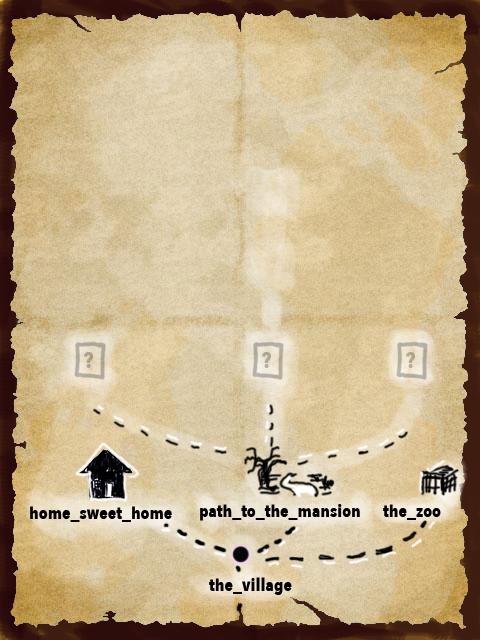
<style>
.page{position:relative;width:480px;height:640px}
.page>*{position:absolute;margin:0}
.t1{font:22.9px "AvenirNextCondensed-Bold";color:#aba08a}
.t2{font:22.9px "AvenirNextCondensed-Bold";color:#aea695}
.t3{font:22.9px "AvenirNextCondensed-Bold";color:#b1a690}
.t4{font:18px "AvenirNextCondensed-Bold";color:#020002}
</style>
<div class="page">
<p class="t1" style="left:83px;top:352px;width:11px;height:16px">?</p>
<p class="t2" style="left:261px;top:352px;width:11px;height:16px">?</p>
<p class="t3" style="left:405px;top:352px;width:11px;height:16px">?</p>
<p class="t4" style="left:30px;top:506px;width:142px;height:16px">home_sweet_home</p>
<p class="t4" style="left:200px;top:504px;width:160px;height:17px">path_to_the_mansion</p>
<p class="t4" style="left:383px;top:504px;width:58px;height:16px">the_zoo</p>
<p class="t4" style="left:209px;top:577px;width:83px;height:18px">the_village</p>
</div>
